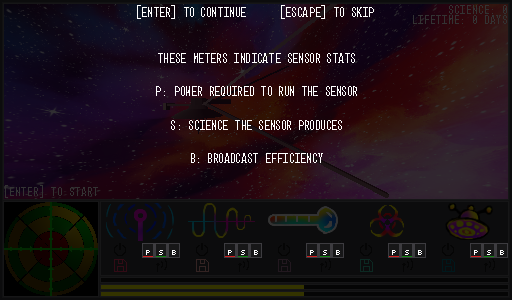
<style>
.page{position:relative;width:512px;height:300px}
.page>*{position:absolute;margin:0}
.t1{font:14px "Mono45Headline-Regular";color:#ffffff}
</style>
<div class="page">
<p class="t1" style="left:137px;top:5px;width:237px;height:14px">[Enter] to continue [escape] to skip</p>
<p class="t1" style="left:156px;top:53px;width:201px;height:110px;text-align:center">These meters indicate sensor stats<br><br>p: Power required to run the sensor<br><br>S: Science the sensor produces<br><br>B: Broadcast efficiency</p>
</div>
